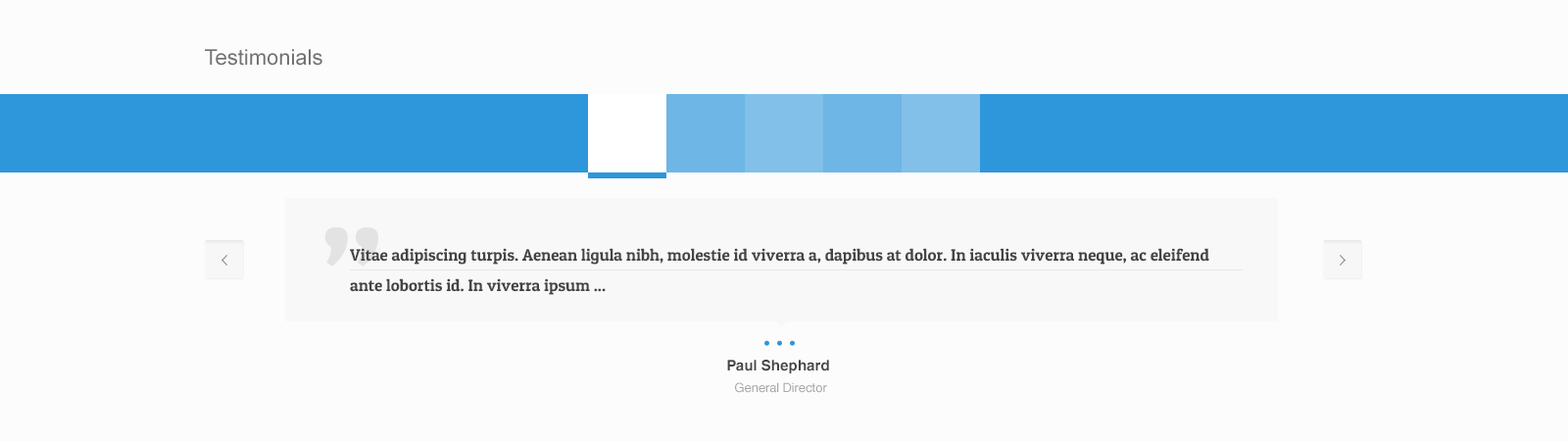
<style>
.page{position:relative;width:1568px;height:441px;background:#fcfcfc}
.page>*{position:absolute;margin:0}
.t1{font:21.6px "ArialMT";color:#737373}
.t2{font:16.6px/30.3px "PatuaOne-Regular";color:#444444}
.t3{font:14.7px "HelveticaWorld-Bold";color:#444444}
.t4{font:12.7px "HelveticaWorld-Regular";color:#a8a8a8}
</style>
<div class="page">
<p class="t1" style="left:205px;top:49px;width:117px;height:17px">Testimonials</p>
<p class="t2" style="left:350px;top:248px;width:859px;height:47px">Vitae adipiscing turpis. Aenean ligula nibh, molestie id viverra a, dapibus at dolor. In iaculis viverra neque, ac eleifend ante lobortis id. In viverra ipsum ...</p>
<p class="t3" style="left:727px;top:360px;width:102px;height:13px">Paul Shephard</p>
<p class="t4" style="left:735px;top:382px;width:92px;height:11px">General Director</p>
</div>
